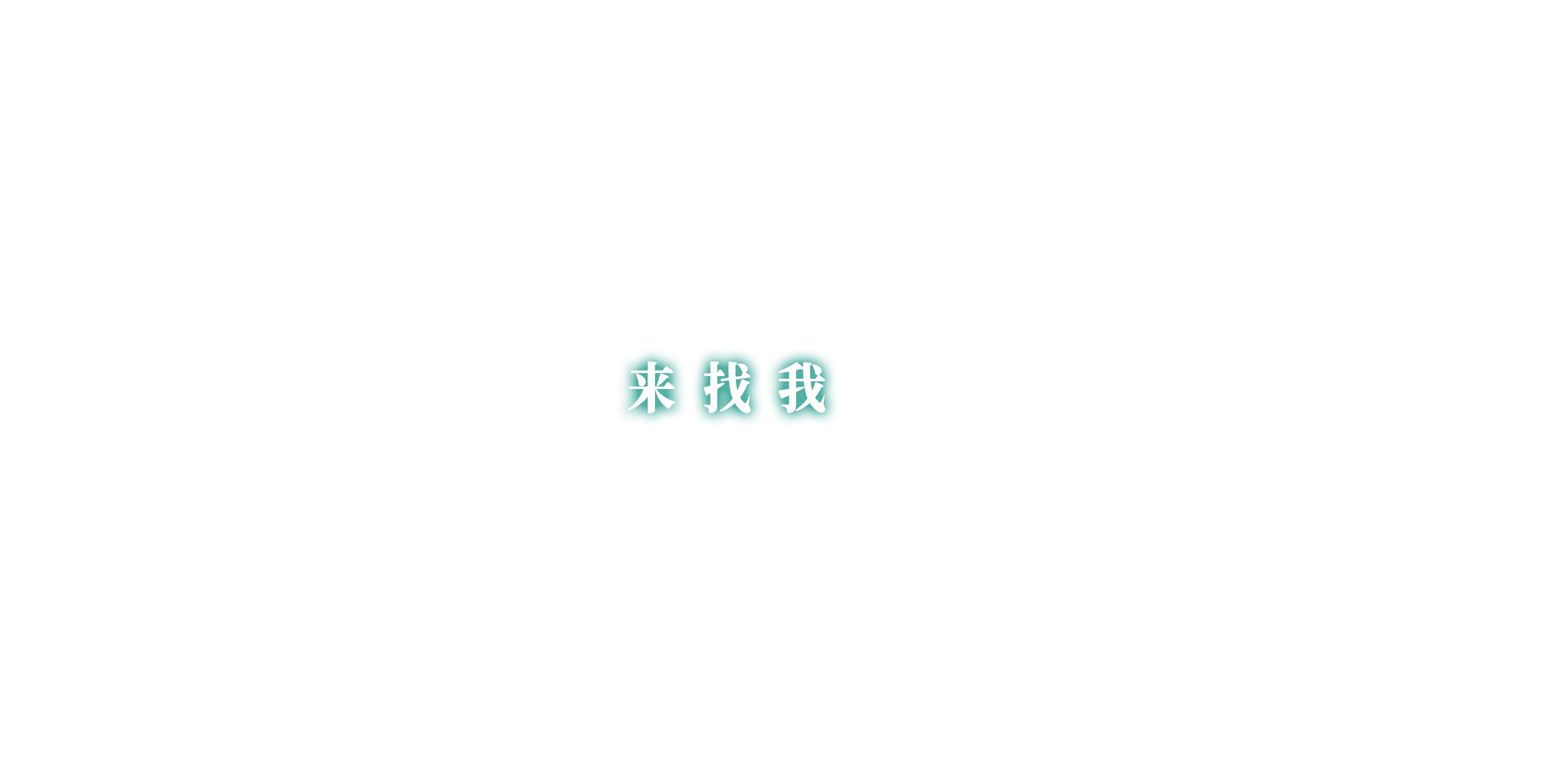
<style>
.page{position:relative;width:1544px;height:772px;background:#ffffff}
.page>*{position:absolute;margin:0}
.t1{font:54.3px "ChillJinshuSongHeavy";letter-spacing:0.14em;color:#ffffff;scale:0.9 1}
</style>
<div class="page">
<p class="t1" style="left:628px;top:361px;width:198px;height:53px">来 找 我</p>
</div>
